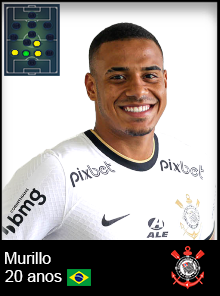
<style>
.page{position:relative;width:220px;height:296px;background:#ffffff}
.page>*{position:absolute;margin:0}
.t1{font:16px "ArialMT";color:#ffffff}
</style>
<div class="page">
<p class="t1" style="left:5px;top:252px;width:46px;height:12px">Murillo</p>
<p class="t1" style="left:5px;top:270px;width:57px;height:12px">20 anos</p>
</div>
